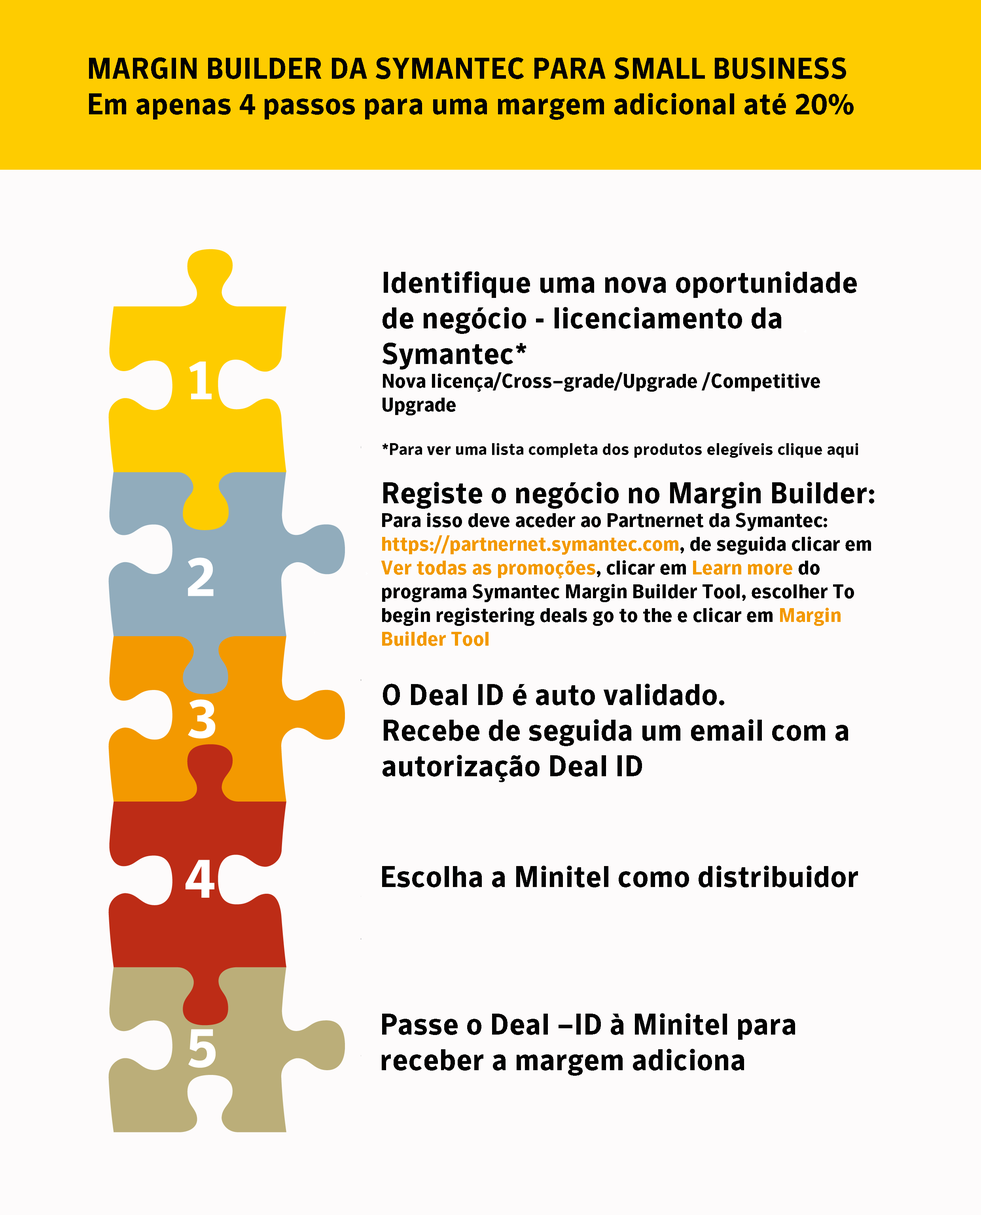
<style>
.page{position:relative;width:981px;height:1215px;background:#fdfbfb}
.page>*{position:absolute;margin:0}
.t1{font:29.7px "SymantecSans-Bold";color:#020202}
.t2{font:19.8px "SymantecSans-Bold";color:#020202}
.t3{font:16.5px "SymantecSans-Bold";color:#020202}
.t4{font:19.8px "SymantecSans-Bold";color:#f39900}
</style>
<div class="page">
<p class="t1" style="left:89px;top:57px;width:765px;height:63px">MARGIN BUILDER DA SYMANTEC PARA SMALL BUSINESS<br>Em apenas 4 passos para uma margem adicional até 20%</p>
<p class="t1" style="left:383px;top:271px;width:475px;height:187px">Identifique uma nova oportunidade<br>de negócio - licenciamento da<br>Symantec*<br><span class="t2">Nova licença/Cross–grade/Upgrade /Competitive<br>Upgrade<br><br></span><span class="t3">*Para ver uma lista completa dos produtos elegíveis clique aqui</span></p>
<p class="t2" style="left:381px;top:482px;width:493px;height:164px"><span class="t1">Registe o negócio no Margin Builder: <br></span>Para isso deve aceder ao Partnernet da Symantec: <span class="t4">https://partnernet.symantec.com</span>, de seguida clicar em <span class="t4">Ver todas as promoções</span>, clicar em <span class="t4">Learn more</span> do programa Symantec Margin Builder Tool, escolher To begin registering deals go to the e clicar em <span class="t4">Margin Builder Tool</span></p>
<p class="t1" style="left:383px;top:684px;width:465px;height:98px">O Deal ID é auto validado.<br>Recebe de seguida um email com a autorização Deal ID</p>
<p class="t1" style="left:382px;top:866px;width:476px;height:22px">Escolha a Minitel como distribuidor</p>
<p class="t1" style="left:382px;top:1013px;width:413px;height:63px">Passe o Deal –ID à Minitel para<br>receber a margem adiciona</p>
</div>
